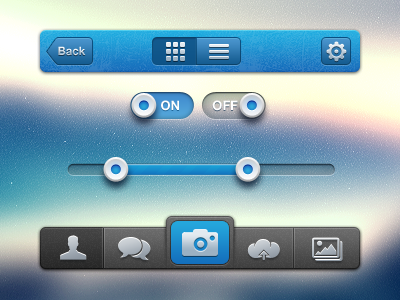
<style>
.page{position:relative;width:400px;height:300px}
.page>*{position:absolute;margin:0}
.t1{font:11.4px "HelveticaNeue-Bold"}
.t2{font:12.9px "HelveticaNeueLTStd-Bd";color:#ffffff}
</style>
<div class="page">
<p class="t1" style="left:58px;top:46px;width:28px;height:10px">Back</p>
<p class="t2" style="left:161px;top:100px;width:18px;height:11px">ON</p>
<p class="t2" style="left:212px;top:100px;width:26px;height:11px">OFF</p>
</div>
